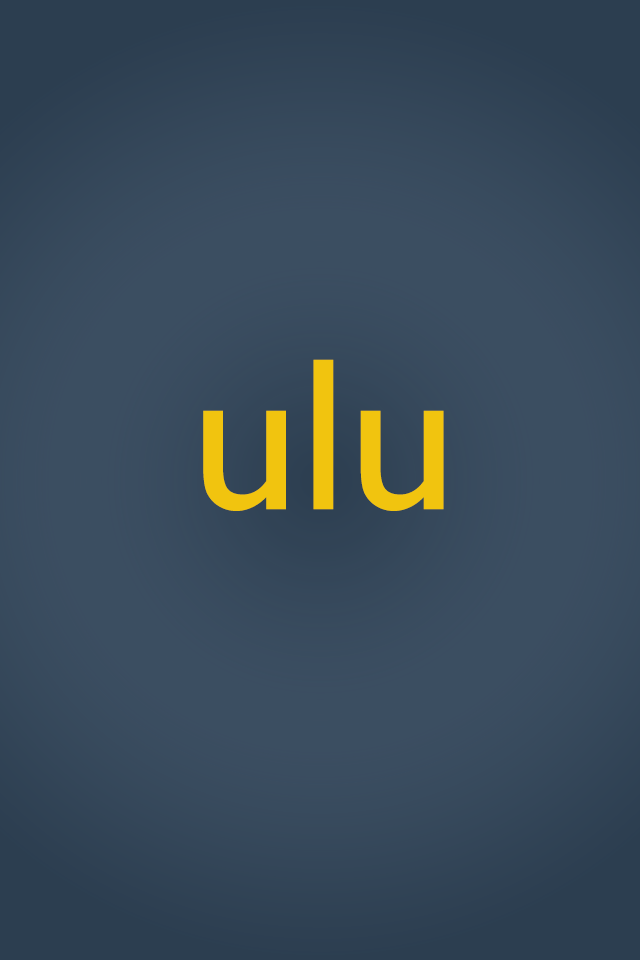
<style>
.page{position:relative;width:640px;height:960px}
.page>*{position:absolute;margin:0}
.t1{font:219px "GillSansMT";color:#f1c40f}
</style>
<div class="page">
<p class="t1" style="left:203px;top:359px;width:241px;height:152px">ulu</p>
</div>
